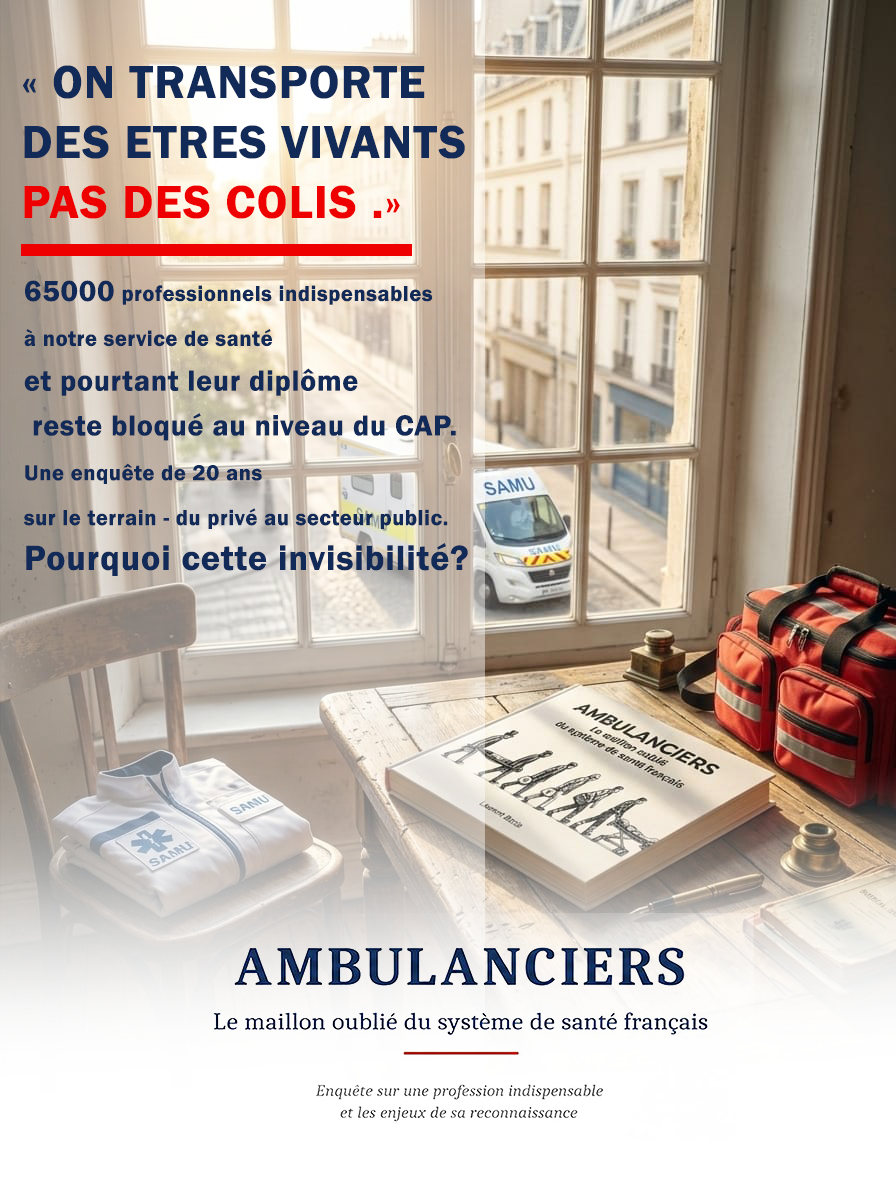
<style>
.page{position:relative;width:896px;height:1200px}
.page>*{position:absolute;margin:0}
.t1{font:48px/60px "FranklinGothic-Demi";letter-spacing:0.025em;color:#122a58}
.t2{font:48px/60px "FranklinGothic-Demi";letter-spacing:0.025em;color:#ef0000}
.t3{font:22.4px/44.8px "FranklinGothic-Demi";letter-spacing:0.025em;color:#112a58}
.t4{font:29.9px/44.8px "FranklinGothic-Demi";letter-spacing:0.025em;color:#112a58}
.t5{font:36px/44.8px "FranklinGothic-Demi";letter-spacing:0.025em;color:#112a58}
</style>
<div class="page">
<p class="t1" style="left:22px;top:65px;width:443px;height:154px">« ON TRANSPORTE <br>DES ETRES VIVANTS<br><span class="t2">PAS DES COLIS .»</span></p>
<p class="t3" style="left:24px;top:280px;width:444px;height:296px"><span class="t4">65000</span> professionnels indispensables <br>à notre service de santé <br><span class="t4">et pourtant leur diplôme<br> reste bloqué au niveau du CAP.<br></span>Une enquête de 20 ans <br>sur le terrain - du privé au secteur public.<br><span class="t5">Pourquoi cette invisibilité?</span></p>
</div>
